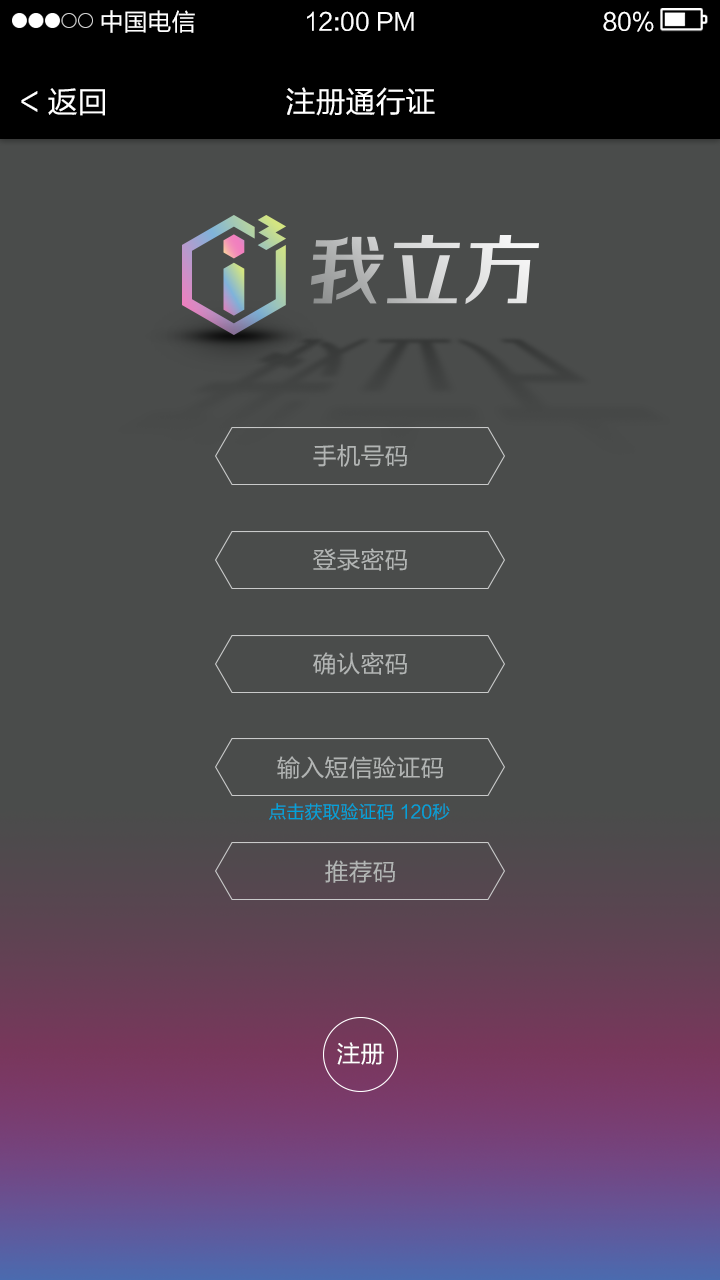
<style>
.page{position:relative;width:720px;height:1280px;background:#4a4c4b}
.page>*{position:absolute;margin:0}
.t1{font:24px "FZLTHK--GBK1-0";color:#ffffff}
.t2{font:30px "FZLTHK--GBK1-0";color:#ffffff}
.t3{font:24px/104px "FZLTHK--GBK1-0";color:#b2b5b4}
.t4{font:18px "FZLTHK--GBK1-0";color:#00a3db}
</style>
<div class="page">
<p class="t1" style="left:101px;top:10px;width:94px;height:23px">中国电信</p>
<p class="t1" style="left:307px;top:11px;width:107px;height:20px">12:00 PM</p>
<p class="t1" style="left:603px;top:11px;width:51px;height:21px">80%</p>
<p class="t2" style="left:21px;top:88px;width:84px;height:28px">&lt; 返回</p>
<p class="t2" style="left:286px;top:87px;width:149px;height:29px">注册通行证</p>
<p class="t3" style="left:277px;top:444px;width:166px;height:439px;text-align:center">手机号码<br>登录密码<br>确认密码<br>输入短信验证码<br>推荐码</p>
<p class="t4" style="left:269px;top:803px;width:181px;height:18px">点击获取验证码 120秒</p>
<p class="t1" style="left:337px;top:1042px;width:47px;height:23px">注册</p>
</div>
